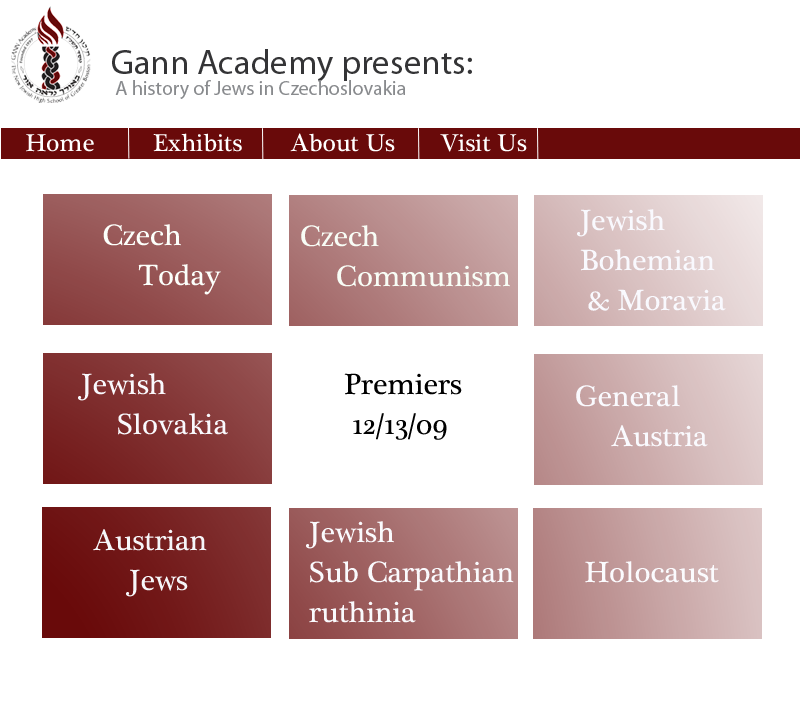
<style>
.page{position:relative;width:800px;height:709px;background:#ffffff}
.page>*{position:absolute;margin:0}
.t1{font:20px/21px "MyriadPro-Regular";color:#888a8d}
.t2{font:35px/21px "MyriadPro-Regular";color:#343436}
.t3{font:25px "PlantagenetCherokee";color:#ffffff}
.t4{font:30px/40px "PlantagenetCherokee";color:#f9f9fe}
.t5{font:30px/40px "PlantagenetCherokee";color:#fcfffb}
.t6{font:30px/40px "PlantagenetCherokee";color:#f8fdf6}
.t7{font:30px/40px "PlantagenetCherokee";color:#f9f9fd}
.t8{font:30px/40px "PlantagenetCherokee";color:#000000}
.t9{font:30px/40px "PlantagenetCherokee";color:#fafafe}
.t10{font:30px/40px "PlantagenetCherokee";color:#fafafd}
.t11{font:30px/40px "PlantagenetCherokee";color:#f6f6f9}
.t12{font:30px "PlantagenetCherokee";color:#fbfbfe}
</style>
<div class="page">
<p class="t1" style="left:112px;top:49px;width:360px;height:50px"><span class="t2">Gann Academy presents:<br></span> A history of Jews in Czechoslovakia</p>
<p class="t3" style="left:26px;top:133px;width:501px;height:19px">Home     Exhibits   About Us    Visit Us</p>
<p class="t4" style="left:577px;top:209px;width:149px;height:102px">Jewish<br>Bohemian<br> &amp; Moravia</p>
<p class="t5" style="left:103px;top:224px;width:118px;height:71px">Czech<br> Today</p>
<p class="t6" style="left:301px;top:225px;width:209px;height:62px">Czech<br> Communism</p>
<p class="t7" style="left:78px;top:373px;width:150px;height:62px">Jewish<br> Slovakia</p>
<p class="t8" style="left:344px;top:373px;width:118px;height:67px">Premiers <br> 12/13/09</p>
<p class="t9" style="left:576px;top:385px;width:132px;height:62px">General<br> Austria</p>
<p class="t10" style="left:306px;top:521px;width:208px;height:102px">Jewish <br>Sub Carpathian<br>ruthinia</p>
<p class="t11" style="left:93px;top:529px;width:114px;height:68px">Austrian<br> Jews</p>
<p class="t12" style="left:585px;top:561px;width:134px;height:22px">Holocaust</p>
</div>
